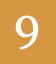
<style>
.page{position:relative;width:56px;height:64px;background:#d59541}
.page>*{position:absolute;margin:0}
.t1{font:46.7px "Georgia";color:#ffffff}
</style>
<div class="page">
<p class="t1" style="left:15px;top:15px;width:24px;height:35px">9</p>
</div>
